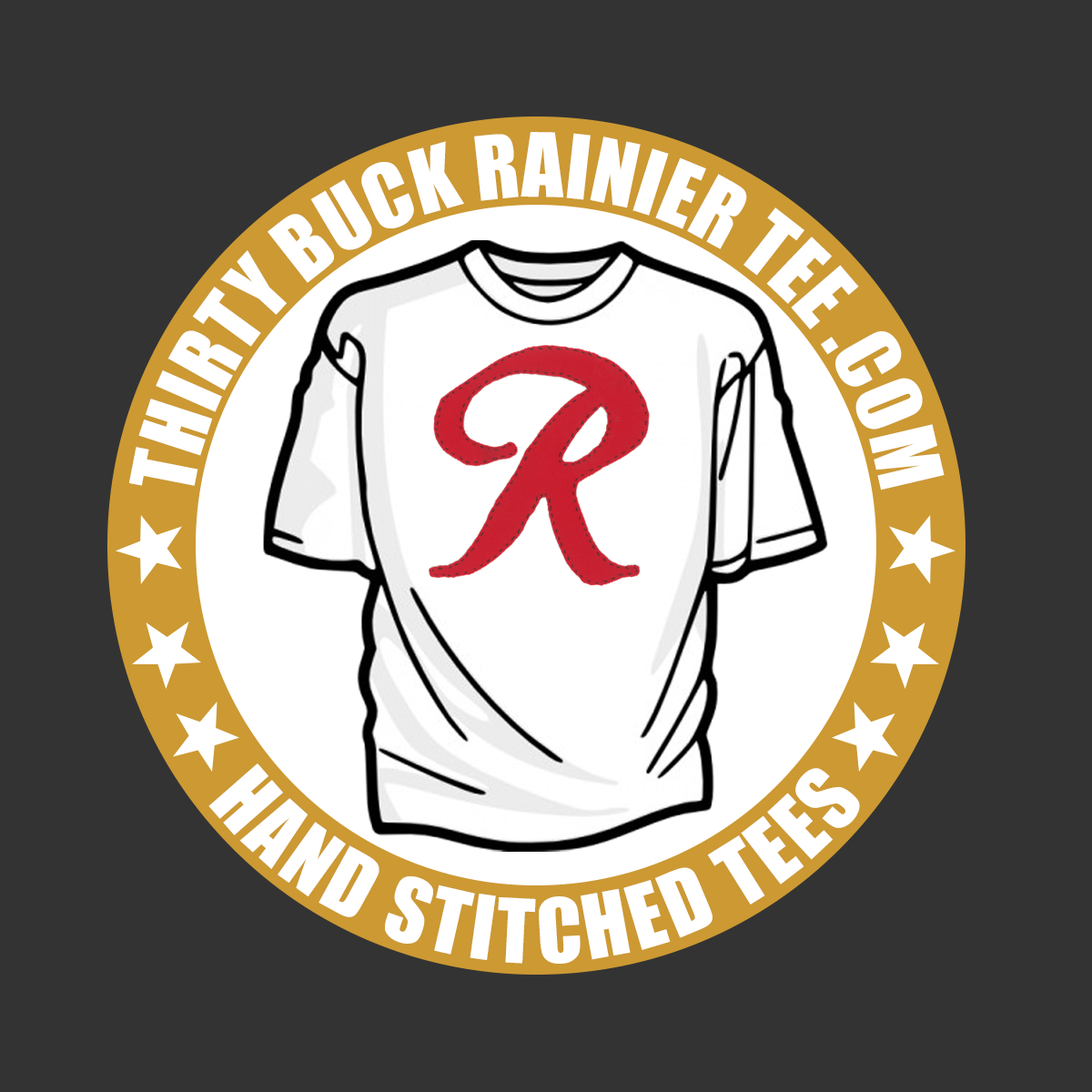
<style>
.page{position:relative;width:1092px;height:1092px;background:#333333}
.page>*{position:absolute;margin:0}
.t1{font:81.9px "Impact";color:#ffffff}
.t2{font:81.9px "Impact";letter-spacing:0.08em;color:#ffffff}
</style>
<div class="page">
<p class="t1" style="left:129px;top:132px;width:816px;height:358px">THIRTY BUCK RAINIER TEE .COM</p>
<p class="t2" style="left:208px;top:763px;width:652px;height:201px;text-align:center">HAND STITCHED TEES</p>
</div>
